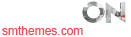
<style>
.page{position:relative;width:131px;height:37px;background:#ffffff}
.page>*{position:absolute;margin:0}
.t1{font:12px "ArialMT";color:#fb4c53}
</style>
<div class="page">
<p class="t1" style="left:2px;top:26px;width:81px;height:9px">smthemes.com</p>
</div>
